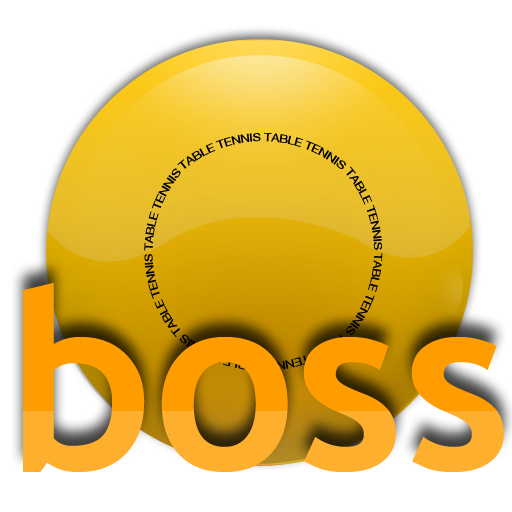
<style>
.page{position:relative;width:512px;height:512px;background:#ffffff}
.page>*{position:absolute;margin:0}
.t1{font:11.1px "HelveticaNeue";color:#000000}
.t2{font:250px "TrebuchetMS-Bold"}
</style>
<div class="page">
<p class="t1" style="left:177px;top:132px;width:169px;height:37px">TABLE TENNIS TABLE TENNIS</p>
<p class="t1" style="left:144px;top:168px;width:37px;height:169px;rotate:-90deg">TABLE TENNIS TABLE TENNIS</p>
<p class="t1" style="left:346px;top:166px;width:37px;height:170px;rotate:90deg">TABLE TENNIS TABLE TENNIS</p>
<p class="t2" style="left:23px;top:283px;width:481px;height:189px">boss</p>
</div>
